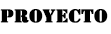
<style>
.page{position:relative;width:111px;height:34px;background:#ffffff}
.page>*{position:absolute;margin:0}
.t1{font:19.6px "Stencil";color:#000000;font-weight:bold;scale:1.06 1}
</style>
<div class="page">
<p class="t1" style="left:0px;top:9px;width:108px;height:14px">PROYECTO</p>
</div>
